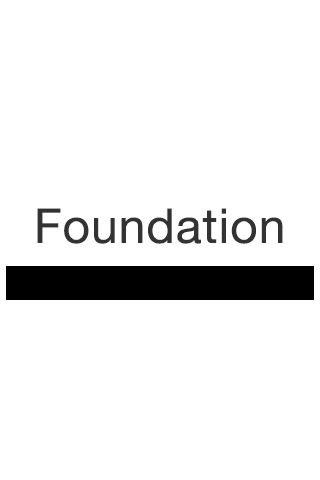
<style>
.page{position:relative;width:320px;height:480px;background:#ffffff}
.page>*{position:absolute;margin:0}
.t1{font:48px "HelveticaNeue";letter-spacing:0.02em;color:#333333}
</style>
<div class="page">
<p class="t1" style="left:37px;top:208px;width:246px;height:36px">Foundation</p>
</div>
